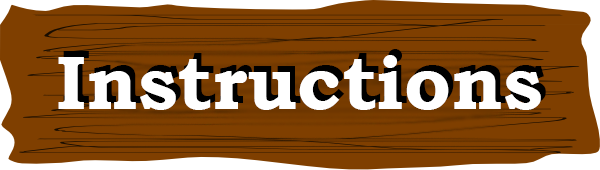
<style>
.page{position:relative;width:600px;height:170px;background:#7f3f00}
.page>*{position:absolute;margin:0}
.t1{font:75.9px "BookmanOldStyle-Bold";color:#ffffff}
</style>
<div class="page">
<p class="t1" style="left:58px;top:55px;width:483px;height:55px">Instructions</p>
</div>
